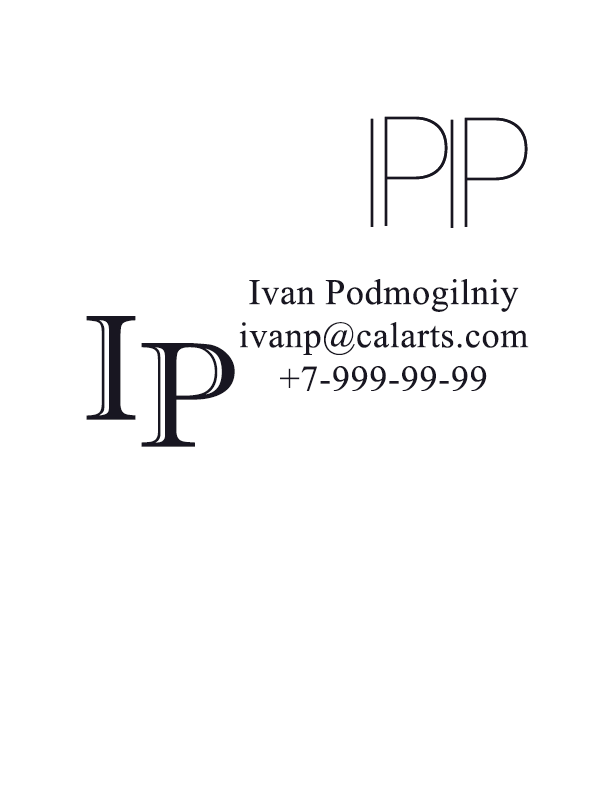
<style>
.page{position:relative;width:612px;height:792px;background:#ffffff}
.page>*{position:absolute;margin:0}
.t1{font:150px "ISOCT";letter-spacing:0.02em;color:#181621}
.t2{font:36px "TimesNewRomanPSMT";letter-spacing:0.02em;color:#181621}
.t3{font:150px "ImprintMT-Shadow";letter-spacing:0.02em;color:#181621}
</style>
<div class="page">
<p class="t1" style="left:370px;top:118px;width:4px;height:109px">I</p>
<p class="t1" style="left:370px;top:118px;width:4px;height:109px">I</p>
<p class="t1" style="left:384px;top:116px;width:64px;height:110px">P</p>
<p class="t1" style="left:384px;top:116px;width:64px;height:110px">P</p>
<p class="t1" style="left:450px;top:119px;width:4px;height:109px">I</p>
<p class="t1" style="left:450px;top:119px;width:4px;height:109px">I</p>
<p class="t1" style="left:464px;top:117px;width:64px;height:110px">P</p>
<p class="t1" style="left:464px;top:117px;width:64px;height:110px">P</p>
<p class="t2" style="left:239px;top:279px;width:290px;height:112px;text-align:center">Ivan Podmogilniy<br>ivanp@calarts.com<br>+7-999-99-99</p>
<p class="t3" style="left:86px;top:316px;width:50px;height:104px">I</p>
<p class="t3" style="left:141px;top:343px;width:94px;height:104px">P</p>
</div>
